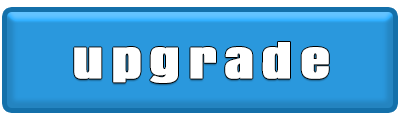
<style>
.page{position:relative;width:400px;height:120px;background:#2a98dd}
.page>*{position:absolute;margin:0}
.t1{font:41.7px "Anton";letter-spacing:0.125em;color:#ffffff;font-weight:bold;scale:1.41 1}
</style>
<div class="page">
<p class="t1" style="left:74px;top:42px;width:255px;height:41px">upgrade</p>
</div>
